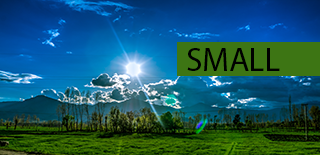
<style>
.page{position:relative;width:320px;height:155px}
.page>*{position:absolute;margin:0}
.t1{font:33.3px "MyriadPro-Regular";color:#000000}
</style>
<div class="page">
<p class="t1" style="left:187px;top:48px;width:93px;height:23px">SMALL</p>
</div>
